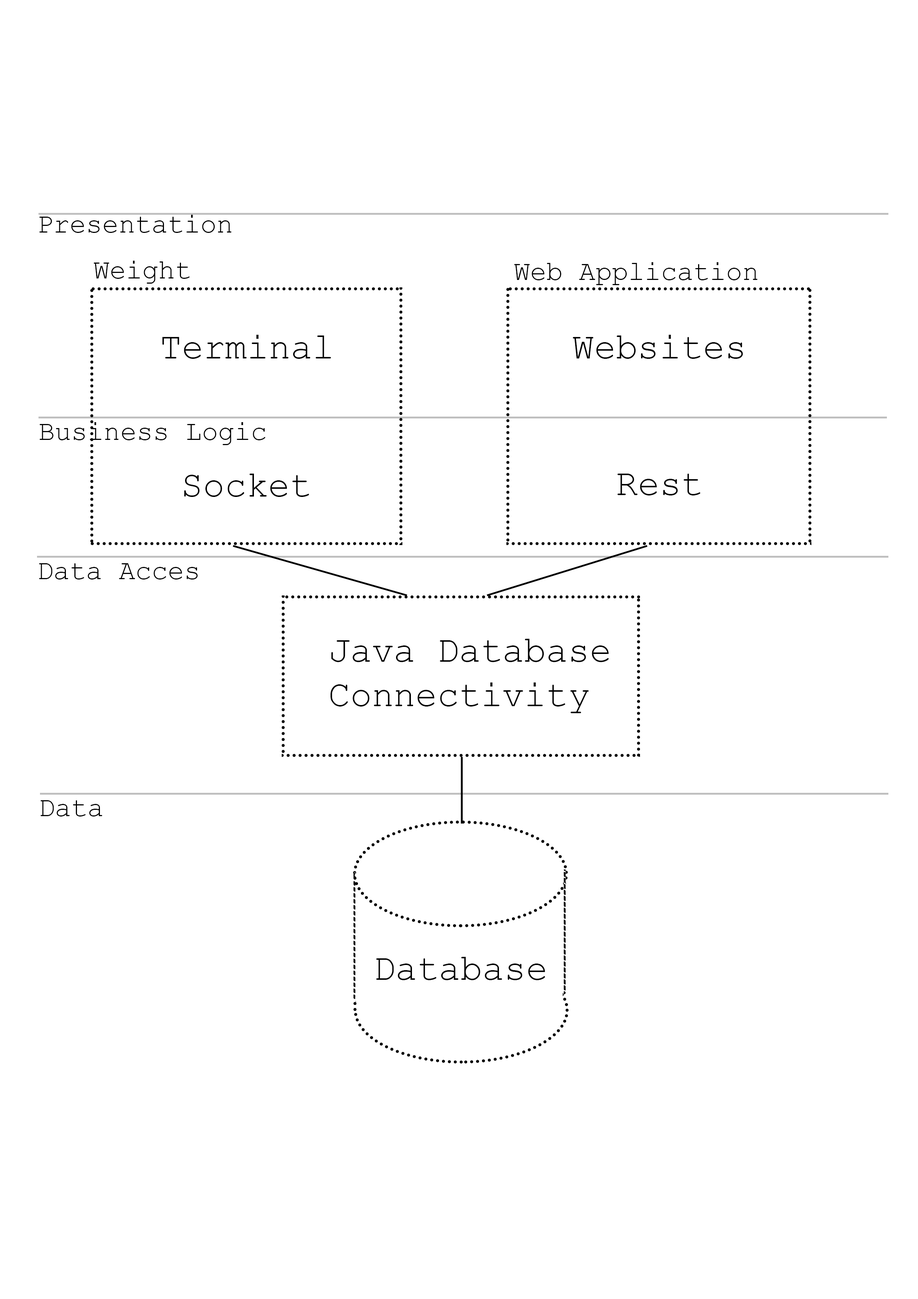
<style>
.page{position:relative;width:918px;height:1299px;background:#ffffff}
.page>*{position:absolute;margin:0}
.t1{font:27.8px "CourierNewPSMT";color:#000000}
.t2{font:37px "CourierNewPSMT";color:#000000}
</style>
<div class="page">
<p class="t1" style="left:39px;top:215px;width:193px;height:18px">Presentation</p>
<p class="t1" style="left:94px;top:261px;width:96px;height:23px">Weight</p>
<p class="t1" style="left:514px;top:262px;width:244px;height:23px">Web Application</p>
<p class="t2" style="left:162px;top:335px;width:169px;height:24px">Terminal</p>
<p class="t2" style="left:573px;top:335px;width:170px;height:24px">Websites</p>
<p class="t1" style="left:40px;top:422px;width:225px;height:23px">Business Logic</p>
<p class="t2" style="left:184px;top:474px;width:125px;height:23px">Socket</p>
<p class="t2" style="left:618px;top:474px;width:82px;height:21px">Rest</p>
<p class="t1" style="left:39px;top:563px;width:159px;height:16px">Data Acces</p>
<p class="t2" style="left:331px;top:639px;width:278px;height:74px">Java Database<br>Connectivity</p>
<p class="t1" style="left:40px;top:800px;width:63px;height:16px">Data</p>
<p class="t2" style="left:376px;top:957px;width:169px;height:23px">Database</p>
</div>
